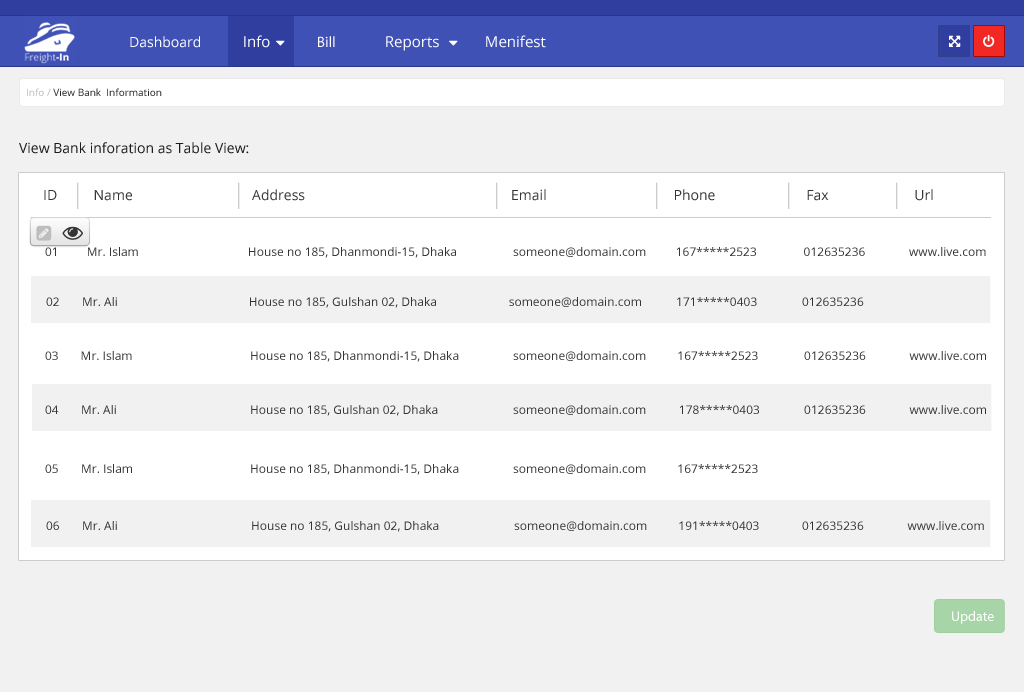
<style>
.page{position:relative;width:1024px;height:692px;background:#f1f1f1}
.page>*{position:absolute;margin:0}
.t1{font:14px "OpenSans";color:#ffffff}
.t2{font:15px "OpenSans";color:#ffffff}
.t3{font:15px "MyriadPro-Regular";color:#ffffff}
.t4{font:10px "OpenSans";color:#2c2b2b}
.t5{font:10px "OpenSans";color:#bebdbd}
.t6{font:14px "OpenSans";color:#1d1c1c}
.t7{font:14px "OpenSans";color:#343434}
.t8{font:12px "OpenSans";color:#343434}
.t9{font:14px "MyriadPro-Regular";color:#ffffff}
</style>
<div class="page">
<p class="t1" style="left:130px;top:36px;width:70px;height:12px">Dashboard</p>
<p class="t2" style="left:244px;top:35px;width:26px;height:13px">Info</p>
<p class="t3" style="left:318px;top:36px;width:17px;height:11px">Bill</p>
<p class="t2" style="left:386px;top:36px;width:53px;height:15px">Reports</p>
<p class="t2" style="left:486px;top:35px;width:60px;height:13px">Menifest</p>
<p class="t4" style="left:27px;top:88px;width:135px;height:8px"><span class="t5">Info / </span>View Bank  Information</p>
<p class="t6" style="left:19px;top:142px;width:230px;height:12px">View Bank inforation as Table View:</p>
<p class="t7" style="left:44px;top:189px;width:889px;height:12px">ID     Name           Address      Email                  Phone     Fax     Url</p>
<p class="t8" style="left:45px;top:247px;width:941px;height:11px">01         Mr. Islam                                   House no 185, Dhanmondi-15, Dhaka   someone@domain.com       167*****2523               012635236              www.live.com</p>
<p class="t8" style="left:46px;top:297px;width:818px;height:11px">02 Mr. Ali                                          House no 185, Gulshan 02, Dhaka                       someone@domain.com           171*****0403  012635236</p>
<p class="t8" style="left:45px;top:351px;width:941px;height:11px">03       Mr. Islam           House no 185, Dhanmondi-15, Dhaka  someone@domain.com          167*****2523   012635236              www.live.com</p>
<p class="t8" style="left:45px;top:405px;width:941px;height:11px">04 Mr. Ali            House no 185, Gulshan 02, Dhaka   someone@domain.com        178*****0403   012635236              www.live.com</p>
<p class="t8" style="left:45px;top:464px;width:713px;height:11px">05 Mr. Islam           House no 185, Dhanmondi-15, Dhaka  someone@domain.com          167*****2523</p>
<p class="t8" style="left:46px;top:521px;width:938px;height:11px">06 Mr. Ali            House no 185, Gulshan 02, Dhaka   someone@domain.com          191*****0403  012635236              www.live.com</p>
<p class="t9" style="left:952px;top:611px;width:42px;height:13px">Update</p>
</div>
